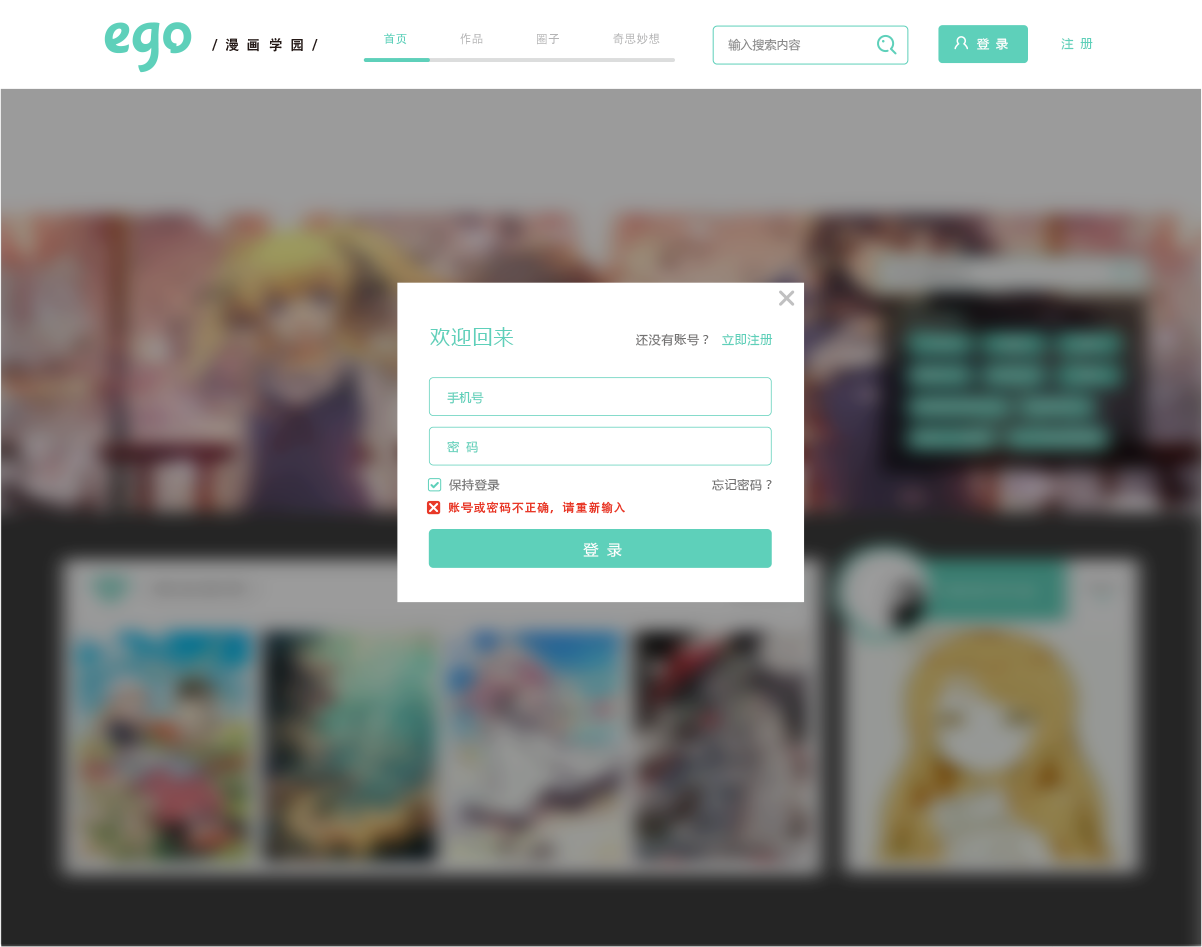
<style>
.page{position:relative;width:1202px;height:947px}
.page>*{position:absolute;margin:0}
.t1{font:14px "FZLTZHK--GBK1-0";letter-spacing:0.56em;color:#231815}
.t2{font:12px "MicrosoftYaHei";color:#898989}
.t3{font:12px "MicrosoftYaHei";color:#ffffff}
.t4{font:12px "MicrosoftYaHei";color:#5ed0ba}
.t5{font:20px "MicrosoftYaHei";letter-spacing:0.06em;color:#5ed0ba}
.t6{font:12px "MicrosoftYaHei";letter-spacing:0.06em;color:#727171}
.t7{font:12px "MicrosoftYaHei";letter-spacing:0.06em;color:#5ed0ba}
.t8{font:12px "HiraginoSansGB-W3";letter-spacing:0.06em;color:#e83828}
.t9{font:15px "MicrosoftYaHei";letter-spacing:0.56em;color:#ffffff}
</style>
<div class="page">
<p class="t1" style="left:212px;top:38px;width:106px;height:14px">/漫画学园/</p>
<p class="t2" style="left:728px;top:38px;width:73px;height:13px">输入搜索内容</p>
<p class="t3" style="left:977px;top:38px;width:31px;height:12px">登  录</p>
<p class="t4" style="left:1061px;top:38px;width:32px;height:12px">注  册</p>
<p class="t5" style="left:430px;top:327px;width:84px;height:20px">欢迎回来</p>
<p class="t6" style="left:636px;top:333px;width:73px;height:13px">还没有账号？</p>
<p class="t7" style="left:722px;top:334px;width:51px;height:12px">立即注册</p>
<p class="t4" style="left:447px;top:392px;width:37px;height:12px">手机号</p>
<p class="t4" style="left:447px;top:441px;width:31px;height:12px">密  码</p>
<p class="t6" style="left:449px;top:478px;width:51px;height:13px">保持登录</p>
<p class="t6" style="left:712px;top:479px;width:60px;height:12px">忘记密码？</p>
<p class="t8" style="left:448px;top:501px;width:177px;height:13px">账号或密码不正确，请重新输入</p>
<p class="t9" style="left:583px;top:542px;width:39px;height:15px">登录</p>
</div>
